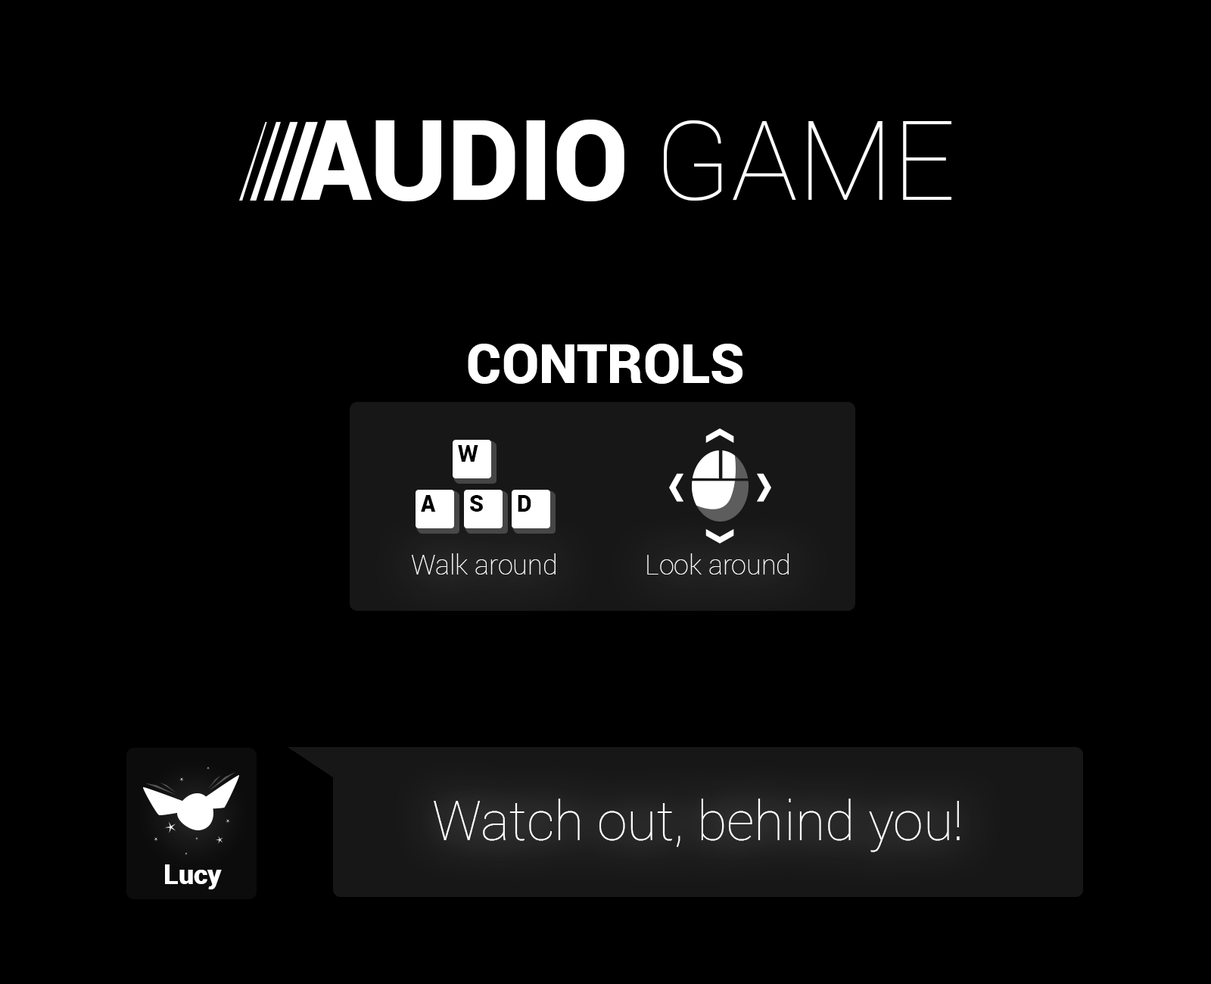
<style>
.page{position:relative;width:1211px;height:984px;background:#000000}
.page>*{position:absolute;margin:0}
.t1{font:111px "Roboto-Black";color:#ffffff}
.t2{font:111px "Roboto-Thin";color:#ffffff}
.t3{font:54.5px "Roboto-Black";color:#ffffff;text-transform:uppercase}
.t4{font:22.7px "Roboto-Black";color:#000000;text-transform:uppercase}
.t5{font:27.3px "Roboto-Thin";color:#fefefe}
.t6{font:54.5px "Roboto-Thin";color:#ffffff}
.t7{font:27.3px "Roboto-Black";color:#ffffff}
</style>
<div class="page">
<p class="t1" style="left:301px;top:120px;width:651px;height:81px">AUDIO<span class="t2"> GAME</span></p>
<p class="t3" style="left:468px;top:344px;width:276px;height:40px">Controls</p>
<p class="t4" style="left:458px;top:445px;width:21px;height:17px">W</p>
<p class="t4" style="left:421px;top:495px;width:15px;height:17px">A</p>
<p class="t4" style="left:470px;top:495px;width:13px;height:17px">S</p>
<p class="t4" style="left:518px;top:495px;width:14px;height:17px">D</p>
<p class="t5" style="left:412px;top:553px;width:144px;height:22px">Walk around</p>
<p class="t5" style="left:647px;top:553px;width:142px;height:22px">Look around</p>
<p class="t6" style="left:434px;top:799px;width:526px;height:54px">Watch out, behind you!</p>
<p class="t7" style="left:165px;top:865px;width:57px;height:25px">Lucy</p>
</div>
